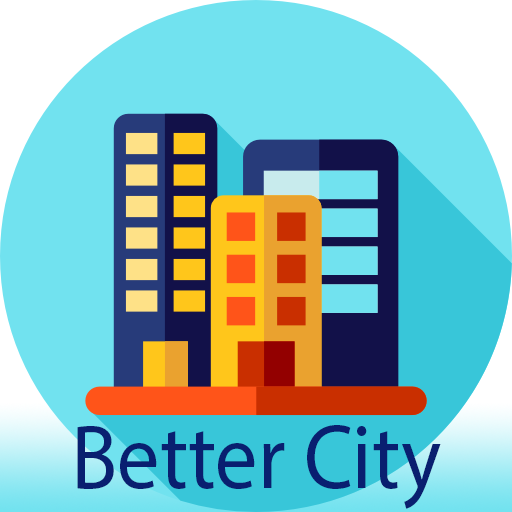
<style>
.page{position:relative;width:512px;height:512px;background:#71e2ef}
.page>*{position:absolute;margin:0}
.t1{font:91.7px "MyriadPro-Regular";color:#091f70;scale:0.92 1}
</style>
<div class="page">
<p class="t1" style="left:77px;top:425px;width:364px;height:84px">Better City</p>
</div>
